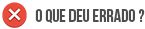
<style>
.page{position:relative;width:145px;height:29px;background:#ffffff}
.page>*{position:absolute;margin:0}
.t1{font:18px "BebasNeue";color:#4d4d4d}
</style>
<div class="page">
<p class="t1" style="left:35px;top:9px;width:110px;height:14px">o que deu errado ?</p>
</div>
